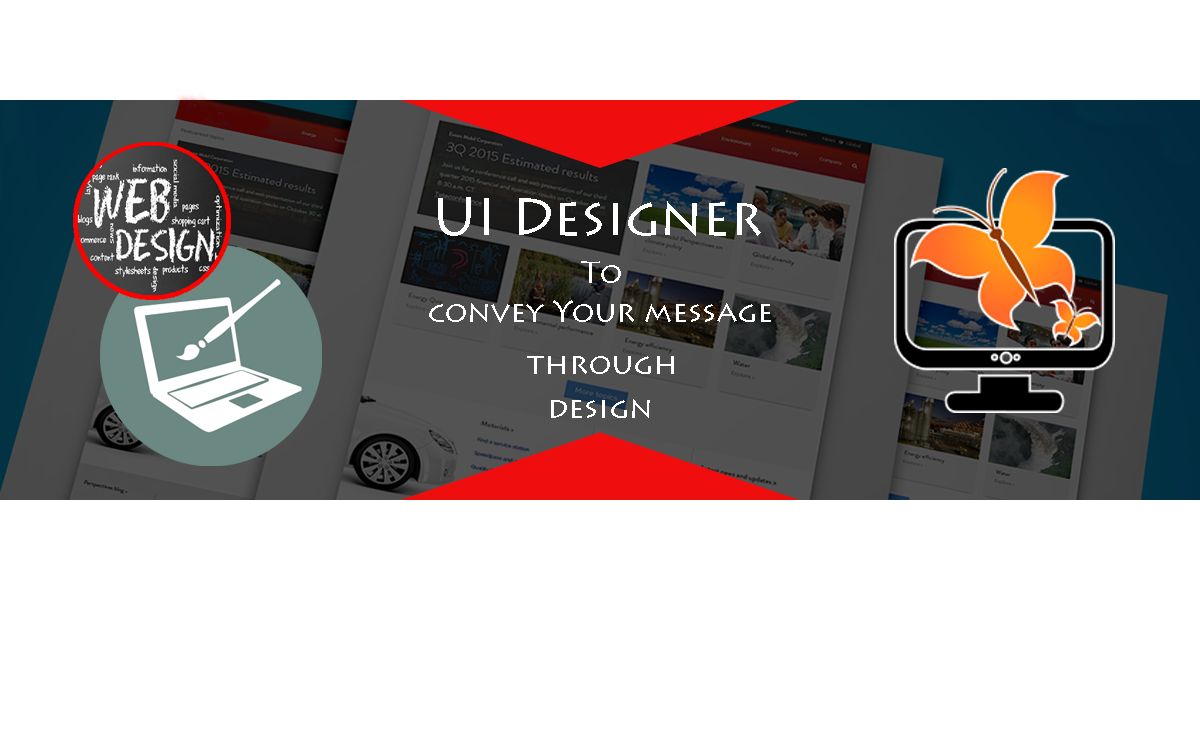
<style>
.page{position:relative;width:1200px;height:750px;background:#ffffff}
.page>*{position:absolute;margin:0}
.t1{font:53px "LithosPro-Regular";color:#fefefe}
.t2{font:30px "LithosPro-Regular";color:#fefefe}
.t3{font:30px "LithosPro-Regular";color:#ffffff}
</style>
<div class="page">
<p class="t1" style="left:438px;top:197px;width:323px;height:39px">UI Designer</p>
<p class="t2" style="left:581px;top:261px;width:40px;height:22px">To</p>
<p class="t3" style="left:429px;top:300px;width:342px;height:23px">convey Your message</p>
<p class="t3" style="left:527px;top:356px;width:147px;height:18px">through</p>
<p class="t3" style="left:551px;top:399px;width:99px;height:19px">design</p>
</div>
